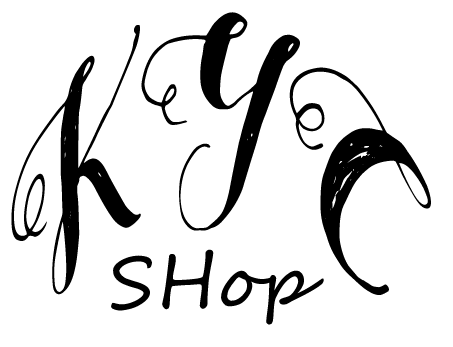
<style>
.page{position:relative;width:453px;height:347px;background:#ffffff}
.page>*{position:absolute;margin:0}
.t1{font:248.8px "MightypeScript";letter-spacing:0.035em;color:#000000;scale:0.48 1}
.t2{font:72px "SegoeScript";letter-spacing:0.035em;color:#000000}
</style>
<div class="page">
<p class="t1" style="left:11px;top:12px;width:420px;height:283px">KYC</p>
<p class="t2" style="left:111px;top:249px;width:213px;height:76px">SHop</p>
</div>
